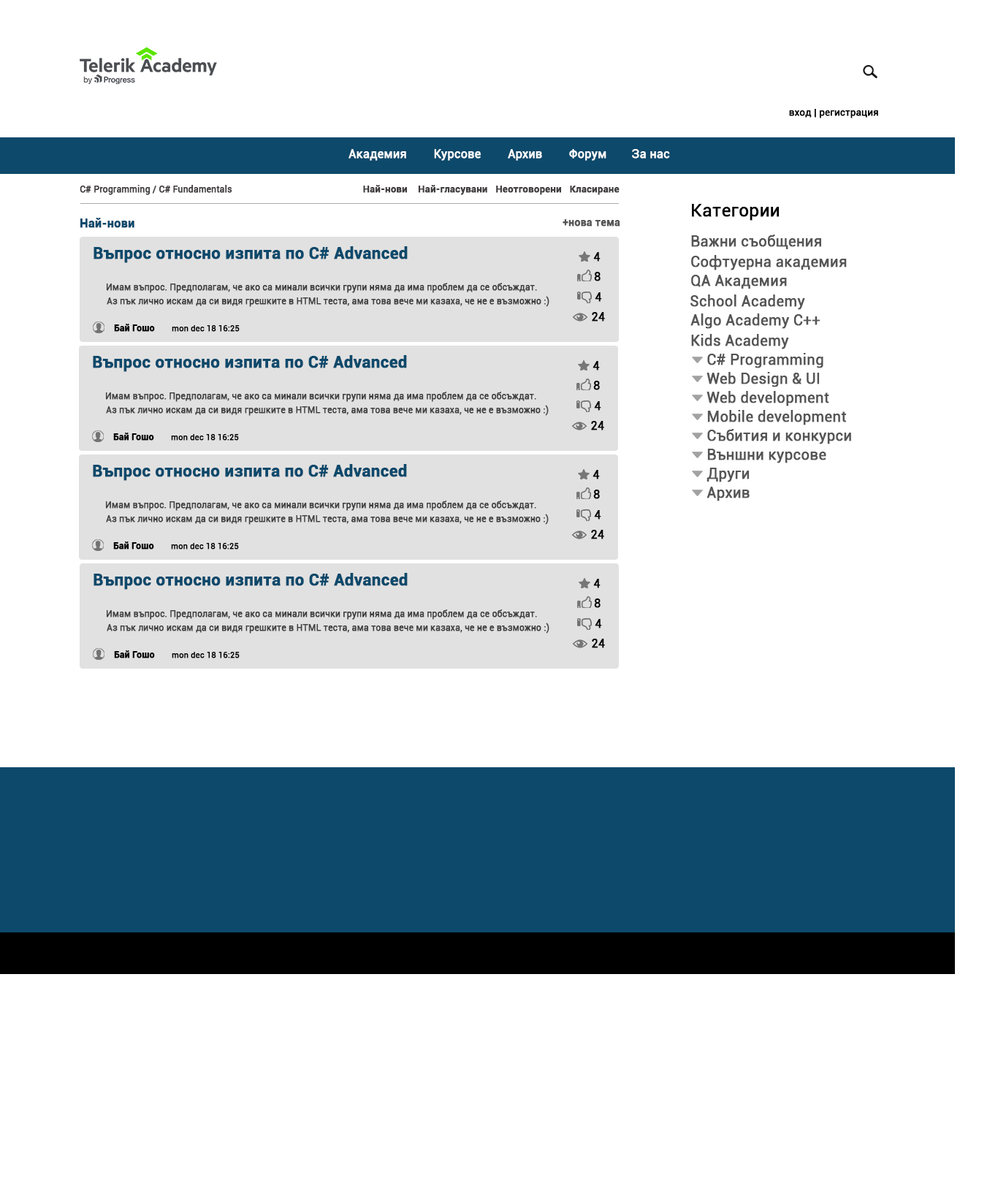
<style>
.page{position:relative;width:998px;height:1194px;background:#ffffff}
.page>*{position:absolute;margin:0}
.t1{font:9.5px "Roboto-Regular";color:#000000;font-weight:bold}
.t2{font:11.7px "Roboto-Regular";color:#fefefe;font-weight:bold}
.t3{font:8.8px "Roboto-Regular";color:#403d3d;font-weight:bold}
.t4{font:9.5px "Roboto-Bold";color:#403d3d;font-weight:bold}
.t5{font:17.5px "Roboto-Regular";color:#000000;font-weight:bold}
.t6{font:11.7px "Roboto-Bold";color:#0d496b;font-weight:bold}
.t7{font:10.2px "Roboto-Bold";color:#555555;font-weight:bold}
.t8{font:14.6px "Roboto-Regular";color:#555555;font-weight:bold}
.t9{font:16.1px "Roboto-Bold";color:#0d496b;font-weight:bold}
.t10{font:11.7px "Roboto-Regular";color:#000000;font-weight:bold}
.t11{font:8.8px "Roboto-Regular";color:#404040;font-weight:bold}
.t12{font:8.8px "Roboto-Bold";color:#000000;font-weight:bold}
.t13{font:8px "Roboto-Regular";color:#000000;font-weight:bold}
</style>
<div class="page">
<p class="t1" style="left:789px;top:109px;width:90px;height:9px">вход | регистрация</p>
<p class="t2" style="left:349px;top:149px;width:57px;height:12px">Академия</p>
<p class="t2" style="left:434px;top:149px;width:47px;height:12px">Курсове</p>
<p class="t2" style="left:508px;top:149px;width:34px;height:12px">Архив</p>
<p class="t2" style="left:569px;top:149px;width:38px;height:12px">Форум</p>
<p class="t2" style="left:632px;top:149px;width:38px;height:10px">За нас</p>
<p class="t3" style="left:80px;top:185px;width:152px;height:10px">C# Programming / C# Fundamentals</p>
<p class="t4" style="left:363px;top:185px;width:257px;height:10px">Най-нови    Най-гласувани   Неотговорени   Класиране</p>
<p class="t5" style="left:692px;top:204px;width:88px;height:17px">Категории</p>
<p class="t6" style="left:80px;top:218px;width:54px;height:10px">Най-нови</p>
<p class="t7" style="left:563px;top:219px;width:58px;height:8px">+нова тема</p>
<p class="t8" style="left:691px;top:235px;width:131px;height:14px">Важни съобщения</p>
<p class="t9" style="left:94px;top:246px;width:314px;height:17px">Въпрос относно изпита по C# Advanced</p>
<p class="t10" style="left:594px;top:252px;width:7px;height:10px">4</p>
<p class="t8" style="left:691px;top:255px;width:156px;height:15px">Софтуерна академия</p>
<p class="t10" style="left:594px;top:272px;width:7px;height:9px">8</p>
<p class="t8" style="left:691px;top:275px;width:96px;height:14px">QA Академия</p>
<p class="t11" style="left:106px;top:283px;width:431px;height:10px">Имам въпрос. Предполагам, че ако са минали всички групи няма да има проблем да се обсъждат.</p>
<p class="t10" style="left:595px;top:292px;width:7px;height:10px">4</p>
<p class="t11" style="left:107px;top:296px;width:443px;height:11px">Аз пък лично искам да си видя грешките в HTML теста, ама това вече ми казаха, че не е възможно :)</p>
<p class="t8" style="left:691px;top:295px;width:114px;height:15px">School Academy</p>
<p class="t10" style="left:592px;top:312px;width:13px;height:10px">24</p>
<p class="t8" style="left:691px;top:314px;width:130px;height:15px">Algo Academy C++</p>
<p class="t12" style="left:114px;top:324px;width:41px;height:8px">Бай Гошо</p>
<p class="t13" style="left:172px;top:325px;width:68px;height:7px">mon dec 18 16:25</p>
<p class="t8" style="left:691px;top:334px;width:98px;height:15px">Kids Academy</p>
<p class="t8" style="left:708px;top:353px;width:116px;height:15px">C# Programming</p>
<p class="t9" style="left:93px;top:355px;width:314px;height:17px">Въпрос относно изпита по C# Advanced</p>
<p class="t10" style="left:593px;top:361px;width:7px;height:10px">4</p>
<p class="t8" style="left:707px;top:372px;width:113px;height:15px">Web Design &amp; UI</p>
<p class="t10" style="left:594px;top:381px;width:6px;height:9px">8</p>
<p class="t11" style="left:105px;top:392px;width:431px;height:10px">Имам въпрос. Предполагам, че ако са минали всички групи няма да има проблем да се обсъждат.</p>
<p class="t10" style="left:594px;top:401px;width:8px;height:10px">4</p>
<p class="t8" style="left:707px;top:391px;width:123px;height:15px">Web development</p>
<p class="t11" style="left:106px;top:405px;width:443px;height:11px">Аз пък лично искам да си видя грешките в HTML теста, ама това вече ми казаха, че не е възможно :)</p>
<p class="t8" style="left:708px;top:410px;width:138px;height:15px">Mobile development</p>
<p class="t10" style="left:591px;top:421px;width:13px;height:10px">24</p>
<p class="t12" style="left:113px;top:433px;width:41px;height:8px">Бай Гошо</p>
<p class="t13" style="left:171px;top:434px;width:68px;height:7px">mon dec 18 16:25</p>
<p class="t8" style="left:708px;top:429px;width:144px;height:15px">Събития и конкурси</p>
<p class="t8" style="left:708px;top:449px;width:119px;height:14px">Външни курсове</p>
<p class="t9" style="left:93px;top:464px;width:314px;height:17px">Въпрос относно изпита по C# Advanced</p>
<p class="t10" style="left:593px;top:470px;width:7px;height:9px">4</p>
<p class="t8" style="left:707px;top:468px;width:43px;height:14px">Други</p>
<p class="t10" style="left:594px;top:490px;width:6px;height:9px">8</p>
<p class="t8" style="left:707px;top:487px;width:43px;height:14px">Архив</p>
<p class="t11" style="left:105px;top:501px;width:431px;height:10px">Имам въпрос. Предполагам, че ако са минали всички групи няма да има проблем да се обсъждат.</p>
<p class="t11" style="left:106px;top:514px;width:443px;height:11px">Аз пък лично искам да си видя грешките в HTML теста, ама това вече ми казаха, че не е възможно :)</p>
<p class="t10" style="left:594px;top:510px;width:8px;height:10px">4</p>
<p class="t10" style="left:591px;top:530px;width:13px;height:9px">24</p>
<p class="t12" style="left:113px;top:542px;width:41px;height:8px">Бай Гошо</p>
<p class="t13" style="left:171px;top:543px;width:68px;height:7px">mon dec 18 16:25</p>
<p class="t9" style="left:94px;top:573px;width:314px;height:17px">Въпрос относно изпита по C# Advanced</p>
<p class="t10" style="left:594px;top:579px;width:7px;height:9px">4</p>
<p class="t10" style="left:594px;top:599px;width:7px;height:9px">8</p>
<p class="t11" style="left:106px;top:610px;width:431px;height:10px">Имам въпрос. Предполагам, че ако са минали всички групи няма да има проблем да се обсъждат.</p>
<p class="t11" style="left:107px;top:623px;width:443px;height:11px">Аз пък лично искам да си видя грешките в HTML теста, ама това вече ми казаха, че не е възможно :)</p>
<p class="t10" style="left:595px;top:619px;width:7px;height:10px">4</p>
<p class="t10" style="left:592px;top:639px;width:13px;height:9px">24</p>
<p class="t12" style="left:114px;top:651px;width:41px;height:8px">Бай Гошо</p>
<p class="t13" style="left:172px;top:652px;width:68px;height:7px">mon dec 18 16:25</p>
</div>
